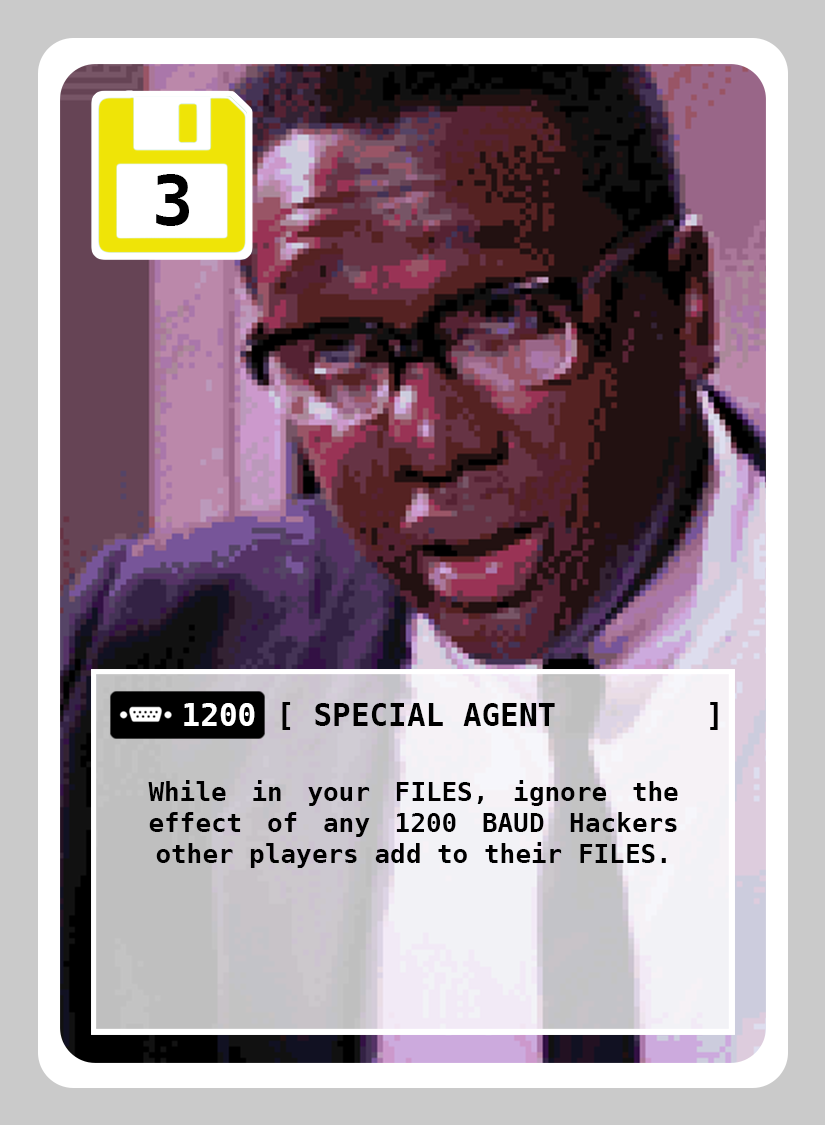
<style>
.page{position:relative;width:825px;height:1125px}
.page>*{position:absolute;margin:0}
.t1{font:69px "DejaVuSansMono-Bold";color:#000000}
.t2{font:31px "DejaVuSansMono-Bold";color:#ffffff}
.t3{font:31px "DejaVuSansMono-Bold";color:#000000}
.t4{font:26px "DejaVuSansMono-Bold";color:#000000}
</style>
<div class="page">
<p class="t1" style="left:156px;top:174px;width:33px;height:52px">3</p>
<p class="t2" style="left:184px;top:703px;width:71px;height:23px">1200</p>
<p class="t3" style="left:315px;top:703px;width:240px;height:23px">SPECIAL AGENT</p>
<p class="t4" style="left:148px;top:780px;width:530px;height:88px;text-align:justify">While in your FILES, ignore the effect of any 1200 BAUD Hackers other players add to their FILES.</p>
</div>
